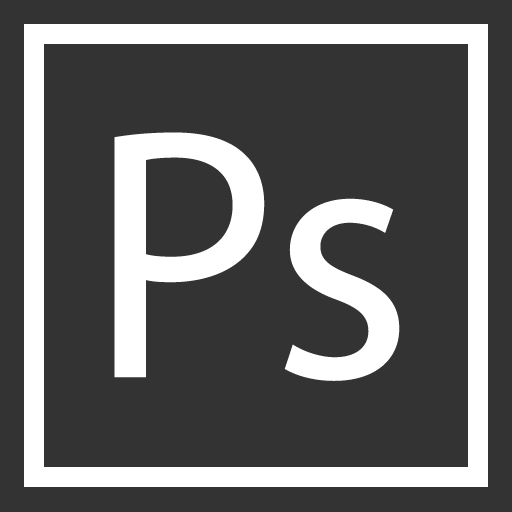
<style>
.page{position:relative;width:512px;height:512px;background:#333333}
.page>*{position:absolute;margin:0}
.t1{font:360.2px "MyriadPro-Regular";color:#ffffff}
</style>
<div class="page">
<p class="t1" style="left:114px;top:132px;width:286px;height:249px">Ps</p>
</div>
